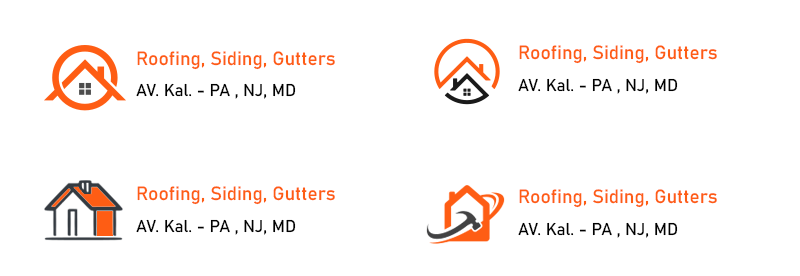
<style>
.page{position:relative;width:800px;height:276px;background:#ffffff}
.page>*{position:absolute;margin:0}
.t1{font:19px/31.7px "Bahnschrift";color:#fe5d14}
.t2{font:16.9px/31.7px "Bahnschrift";color:#000000}
.t3{font:19.1px/31.8px "Bahnschrift";color:#fe5d14}
.t4{font:17px/31.8px "Bahnschrift";color:#000000}
</style>
<div class="page">
<p class="t1" style="left:136px;top:51px;width:199px;height:48px">Roofing, Siding, Gutters<br><span class="t2">AV. Kal. - PA , NJ, MD</span></p>
<p class="t3" style="left:518px;top:45px;width:199px;height:49px">Roofing, Siding, Gutters<br><span class="t4">AV. Kal. - PA , NJ, MD</span></p>
<p class="t3" style="left:136px;top:186px;width:199px;height:49px">Roofing, Siding, Gutters<br><span class="t4">AV. Kal. - PA , NJ, MD</span></p>
<p class="t3" style="left:518px;top:189px;width:199px;height:49px">Roofing, Siding, Gutters<br><span class="t4">AV. Kal. - PA , NJ, MD</span></p>
</div>
